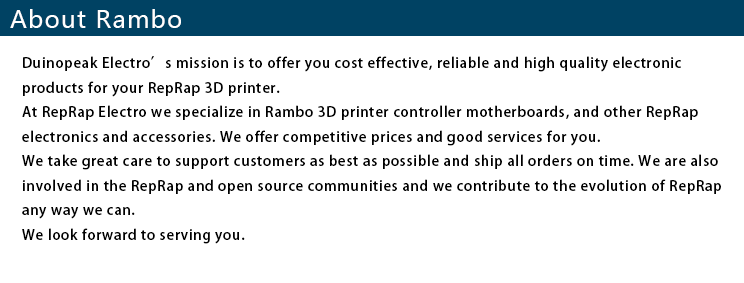
<style>
.page{position:relative;width:744px;height:283px;background:#ffffff}
.page>*{position:absolute;margin:0}
.t1{font:24px "MicrosoftYaHei";letter-spacing:0.05em;color:#ffffff}
.t2{font:14px "AdobeHeitiStd-Regular";letter-spacing:0.05em;color:#000000}
</style>
<div class="page">
<p class="t1" style="left:10px;top:9px;width:171px;height:19px">About Rambo</p>
<p class="t2" style="left:22px;top:56px;width:699px;height:188px">Duinopeak Electro’s mission is to offer you cost effective, reliable and high quality electronic <br>products for your RepRap 3D printer.<br>At RepRap Electro we specialize in Rambo 3D printer controller motherboards, and other RepRap <br>electronics and accessories. We offer competitive prices and good services for you.<br>We take great care to support customers as best as possible and ship all orders on time. We are also <br>involved in the RepRap and open source communities and we contribute to the evolution of RepRap <br>any way we can.<br>We look forward to serving you.</p>
</div>
